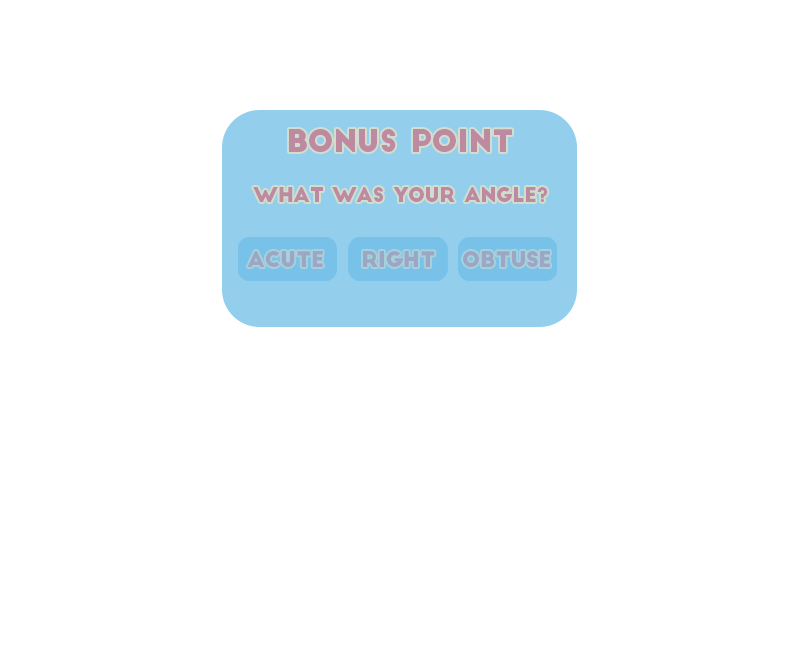
<style>
.page{position:relative;width:800px;height:650px;background:#ffffff}
.page>*{position:absolute;margin:0}
.t1{font:30px "BigJohn";color:#bd8aa1}
.t2{font:20px "BigJohn";color:#bd8aa1}
.t3{font:21.2px "BigJohn";color:#9ca7c6}
</style>
<div class="page">
<p class="t1" style="left:289px;top:129px;width:223px;height:23px">bonus point</p>
<p class="t2" style="left:253px;top:187px;width:295px;height:16px">What was your angle?</p>
<p class="t3" style="left:247px;top:251px;width:76px;height:16px">Acute</p>
<p class="t3" style="left:363px;top:251px;width:72px;height:16px">Right</p>
<p class="t3" style="left:463px;top:251px;width:87px;height:16px">Obtuse</p>
</div>
